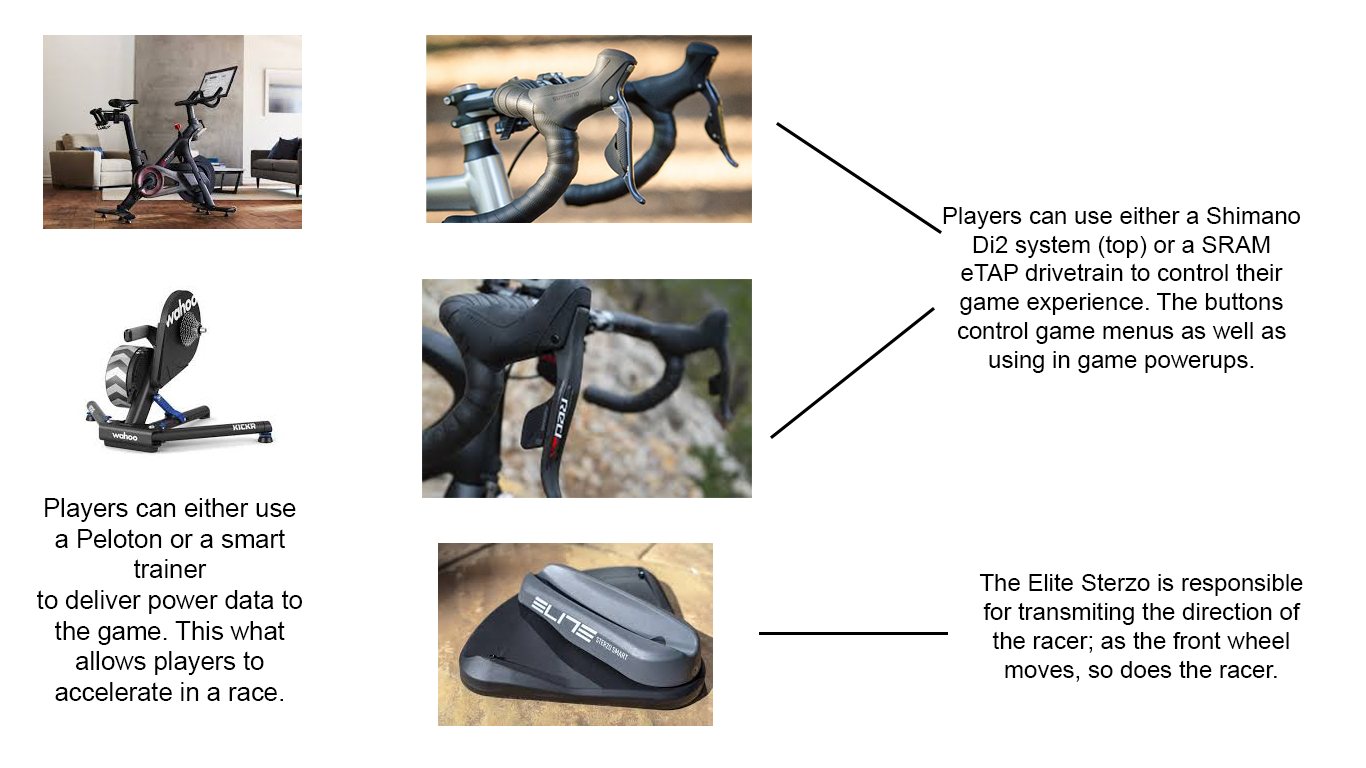
<style>
.page{position:relative;width:1366px;height:768px;background:#ffffff}
.page>*{position:absolute;margin:0}
.t1{font:24px "ArialMT";color:#000000}
.t2{font:25.6px "ArialMT";color:#000000}
</style>
<div class="page">
<p class="t1" style="left:943px;top:206px;width:358px;height:167px;text-align:center">Players can use either a Shimano Di2 system (top) or a SRAM eTAP drivetrain to control their game experience. The buttons control game menus as well as using in game powerups.</p>
<p class="t2" style="left:37px;top:498px;width:265px;height:203px;text-align:center">Players can either use<br>a Peloton or a smart trainer<br>to deliver power data to the game. This what allows players to accelerate in a race.</p>
<p class="t1" style="left:979px;top:573px;width:324px;height:109px;text-align:center">The Elite Sterzo is responsible for transmiting the direction of the racer; as the front wheel moves, so does the racer.</p>
</div>
